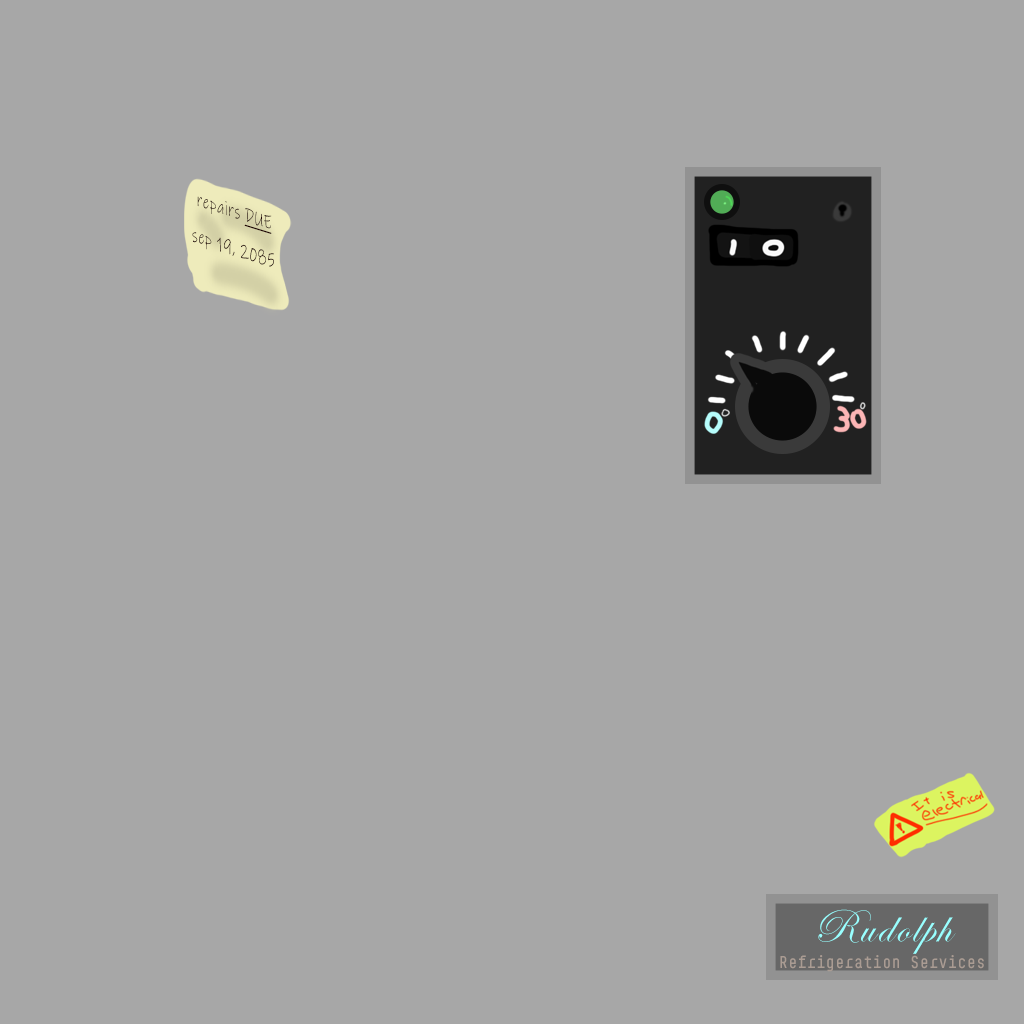
<style>
.page{position:relative;width:1024px;height:1024px;background:#a7a7a7}
.page>*{position:absolute;margin:0}
.t1{font:19.8px/36.4px "InkFree";letter-spacing:0.05em;color:#210404;scale:0.69 1}
.t2{font:19.8px/36.4px "InkFree";letter-spacing:0.05em;color:#210404;text-decoration:underline;scale:0.69 1}
.t3{font:15.7px/26.8px "BCSklonar-Medium";letter-spacing:0.05em;color:#aa9c93}
.t4{font:47.4px/26.8px "EdwardianScriptITC";letter-spacing:0.05em;color:#99ffff}
</style>
<div class="page">
<p class="t1" style="left:192px;top:196px;width:82px;height:71px;text-align:center;rotate:17deg">repairs <span class="t2">DUE<br></span>sep 19, 2085</p>
<p class="t3" style="left:780px;top:909px;width:204px;height:63px;text-align:center"><span class="t4">Rudolph<br></span>Refrigeration Services</p>
</div>
